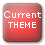
<style>
.page{position:relative;width:45px;height:45px}
.page>*{position:absolute;margin:0}
.t1{font:9px "Verdana";color:#ffffff}
.t2{font:8px "Verdana";color:#ffffff}
</style>
<div class="page">
<p class="t1" style="left:4px;top:11px;width:37px;height:7px">Current</p>
<p class="t2" style="left:8px;top:22px;width:28px;height:6px">THEME</p>
</div>
